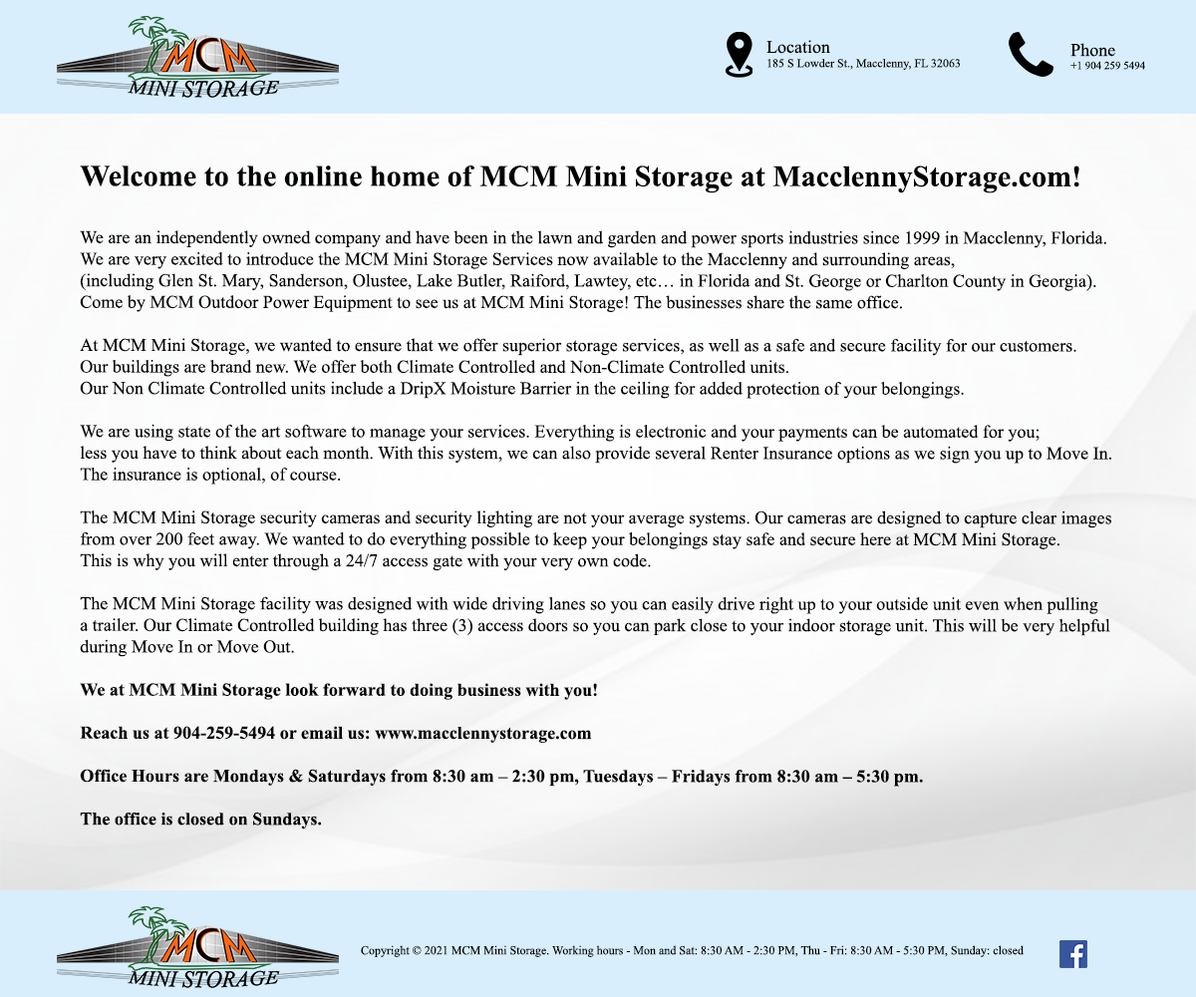
<style>
.page{position:relative;width:1196px;height:997px}
.page>*{position:absolute;margin:0}
.t1{font:11.9px "TimesNewRomanPSMT";color:#000000}
.t2{font:17.9px "TimesNewRomanPSMT";color:#000000}
.t3{font:11px "TimesNewRomanPSMT";color:#000000}
.t4{font:17.9px "TimesNewRomanPSMT";color:#010101}
.t5{font:29.9px "TimesNewRomanPS-BoldMT";color:#010101}
.t6{font:17.9px "TimesNewRomanPS-BoldMT";color:#010101}
.t7{font:12.3px "TimesNewRomanPSMT";color:#000000}
.t8{font:12.3px "TimesNewRomanPSMT";color:#060606}
</style>
<div class="page">
<p class="t1" style="left:767px;top:40px;width:194px;height:30px"><span class="t2">Location<br></span>185 S Lowder St., Macclenny, FL 32063</p>
<p class="t3" style="left:1071px;top:43px;width:74px;height:27px"><span class="t2">Phone <br></span>+1 904 259 5494</p>
<p class="t4" style="left:80px;top:165px;width:1031px;height:664px"><span class="t5">Welcome to the online home of MCM Mini Storage at MacclennyStorage.com!<br><br></span>We are an independently owned company and have been in the lawn and garden and power sports industries since 1999 in Macclenny, Florida.<br>We are very excited to introduce the MCM Mini Storage Services now available to the Macclenny and surrounding areas, <br>(including Glen St. Mary, Sanderson, Olustee, Lake Butler, Raiford, Lawtey, etc… in Florida and St. George or Charlton County in Georgia). <br>Come by MCM Outdoor Power Equipment to see us at MCM Mini Storage! The businesses share the same office.<br><br>At MCM Mini Storage, we wanted to ensure that we offer superior storage services, as well as a safe and secure facility for our customers. <br>Our buildings are brand new. We offer both Climate Controlled and Non-Climate Controlled units. <br>Our Non Climate Controlled units include a DripX Moisture Barrier in the ceiling for added protection of your belongings.<br><br>We are using state of the art software to manage your services. Everything is electronic and your payments can be automated for you; <br>less you have to think about each month. With this system, we can also provide several Renter Insurance options as we sign you up to Move In. <br>The insurance is optional, of course.<br><br>The MCM Mini Storage security cameras and security lighting are not your average systems. Our cameras are designed to capture clear images <br>from over 200 feet away. We wanted to do everything possible to keep your belongings stay safe and secure here at MCM Mini Storage. <br>This is why you will enter through a 24/7 access gate with your very own code.<br><br>The MCM Mini Storage facility was designed with wide driving lanes so you can easily drive right up to your outside unit even when pulling <br>a trailer. Our Climate Controlled building has three (3) access doors so you can park close to your indoor storage unit. This will be very helpful <br>during Move In or Move Out.<br><br><span class="t6">We at MCM Mini Storage look forward to doing business with you!<br><br>Reach us at 904-259-5494 or email us: www.macclennystorage.com<br><br>Office Hours are Mondays &amp; Saturdays from 8:30 am – 2:30 pm, Tuesdays – Fridays from 8:30 am – 5:30 pm.<br><br>The office is closed on Sundays.</span></p>
<p class="t7" style="left:361px;top:945px;width:663px;height:12px"><span class="t8">Copyright © 2021 </span>MCM Mini Storage. Working hours - Mon and Sat: 8:30 AM - 2:30 PM, Thu - Fri: 8:30 AM - 5:30 PM, Sunday: closed</p>
</div>
